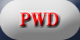
<style>
.page{position:relative;width:80px;height:40px}
.page>*{position:absolute;margin:0}
.t1{font:18px "MyungjoXB-HM"}
</style>
<div class="page">
<p class="t1" style="left:20px;top:12px;width:39px;height:14px">PWD</p>
</div>
